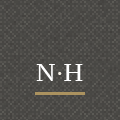
<style>
.page{position:relative;width:120px;height:120px;background:#484744}
.page>*{position:absolute;margin:0}
.t1{font:24px "PTSerif-Caption";letter-spacing:-0.075em;color:#ffffff}
.t2{font:19px "PTSerif-Caption";letter-spacing:-0.05em;color:#f3eee3}
</style>
<div class="page">
<p class="t1" style="left:36px;top:64px;width:47px;height:17px">N  H</p>
<p class="t2" style="left:58px;top:72px;width:4px;height:3px">.</p>
</div>
